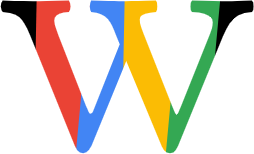
<style>
.page{position:relative;width:254px;height:154px;background:#ffffff}
.page>*{position:absolute;margin:0}
.t1{font:344.4px "LinLibertine"}
</style>
<div class="page">
<p class="t1" style="left:0px;top:0px;width:254px;height:154px">w</p>
</div>
